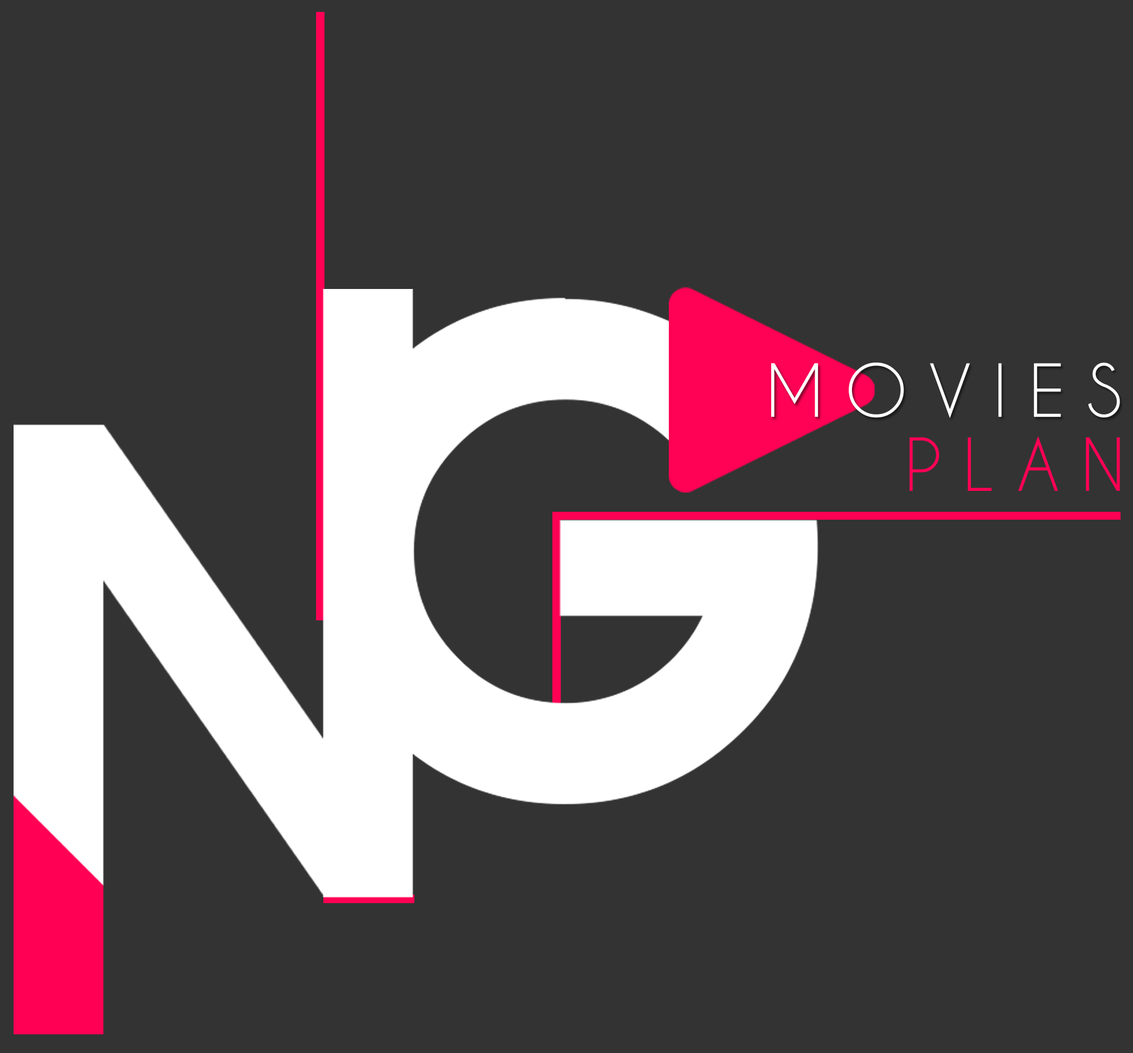
<style>
.page{position:relative;width:1133px;height:1053px;background:#333333}
.page>*{position:absolute;margin:0}
.t1{font:68.1px "CaviarDreams";letter-spacing:0.32em;color:#ffffff}
.t2{font:68.1px "CaviarDreams";letter-spacing:0.32em;color:#ff0054}
</style>
<div class="page">
<p class="t1" style="left:771px;top:362px;width:349px;height:56px">MOVIES</p>
<p class="t2" style="left:909px;top:436px;width:211px;height:55px">PLAN</p>
</div>
